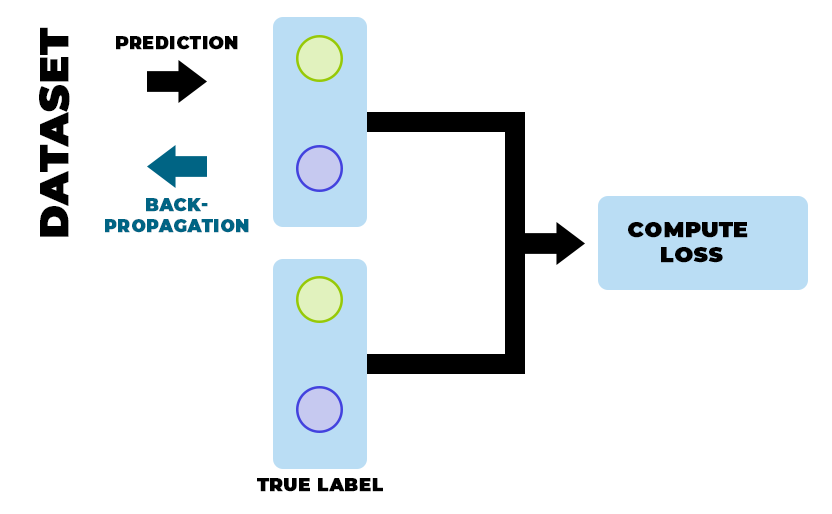
<style>
.page{position:relative;width:832px;height:514px;background:#ffffff}
.page>*{position:absolute;margin:0}
.t1{font:39.9px "Montserrat-Black";letter-spacing:0.02em;color:#000000;text-transform:uppercase;font-weight:bold}
.t2{font:17.1px "Montserrat-Black";letter-spacing:0.02em;color:#000000;text-transform:uppercase;font-weight:bold}
.t3{font:17.1px "Montserrat-Black";letter-spacing:0.02em;color:#006484;text-transform:uppercase;font-weight:bold}
.t4{font:21.3px "Montserrat-Black";letter-spacing:0.02em;color:#000000;text-transform:uppercase;font-weight:bold}
.t5{font:17.8px "Montserrat-Black";letter-spacing:0.02em;color:#000000;text-transform:uppercase;font-weight:bold}
</style>
<div class="page">
<p class="t1" style="left:39px;top:27px;width:31px;height:210px;rotate:-90deg">DATASET</p>
<p class="t2" style="left:116px;top:36px;width:122px;height:14px">PREDICTION</p>
<p class="t3" style="left:105px;top:198px;width:144px;height:35px;text-align:center">BACK-<br>PROPAGATION</p>
<p class="t4" style="left:628px;top:222px;width:120px;height:41px;text-align:center">compute <br>loss</p>
<p class="t5" style="left:257px;top:478px;width:126px;height:14px">TRUE LABEL</p>
</div>
